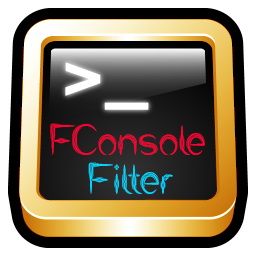
<style>
.page{position:relative;width:256px;height:256px}
.page>*{position:absolute;margin:0}
.t1{font:49.3px "IVORYCULTURE";letter-spacing:0.02em;color:#ff0033}
.t2{font:49.3px "IVORYCULTURE";letter-spacing:0.02em;color:#00d5ff}
</style>
<div class="page">
<p class="t1" style="left:50px;top:123px;width:155px;height:32px">FConsole</p>
<p class="t2" style="left:88px;top:162px;width:85px;height:32px">Filter</p>
</div>
